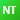
<style>
.page{position:relative;width:20px;height:20px}
.page>*{position:absolute;margin:0}
.t1{font:12px "FranklinGothic-Medium";color:#ffffff}
</style>
<div class="page">
<p class="t1" style="left:3px;top:6px;width:14px;height:8px">NT</p>
</div>
